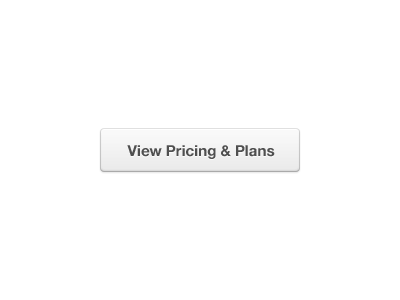
<style>
.page{position:relative;width:400px;height:300px;background:#ffffff}
.page>*{position:absolute;margin:0}
.t1{font:15px "HelveticaNeue-Bold";color:#4f4f4f}
</style>
<div class="page">
<p class="t1" style="left:127px;top:145px;width:148px;height:14px">View Pricing &amp; Plans</p>
</div>
